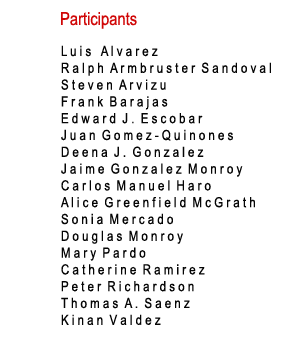
<style>
.page{position:relative;width:300px;height:350px;background:#ffffff}
.page>*{position:absolute;margin:0}
.t1{font:18px "ArialNarrow";color:#d00707}
.t2{font:14px "ArialNarrow";color:#050505}
</style>
<div class="page">
<p class="t1" style="left:61px;top:12px;width:76px;height:17px">Participants</p>
<p class="t2" style="left:60px;top:45px;width:211px;height:280px">L u i s   A l v a r e z<br>R a l p h  A r m b r u s t e r  S a n d o v a l<br>S t e v e n  A r v i z u<br>F r a n k  B a r a j a s<br>E d w a r d  J .  E s c o b a r<br>J u a n  G o m e z - Q u i n o n e s<br>D e e n a  J .  G o n z a l e z<br>J a i m e  G o n z a l e z  M o n r o y<br>C a r l o s  M a n u e l  H a r o<br>A l i c e  G r e e n f i e l d  M c G r a t h<br>S o n i a  M e r c a d o<br>D o u g l a s  M o n r o y<br>M a r y  P a r d o<br>C a t h e r i n e  R a m i r e z<br>P e t e r  R i c h a r d s o n<br>T h o m a s  A .  S a e n z<br>K i n a n  V a l d e z</p>
</div>
